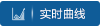
<style>
.page{position:relative;width:100px;height:27px;background:#0f5c98}
.page>*{position:absolute;margin:0}
.t1{font:11.1px "MicrosoftYaHei";letter-spacing:0.04em;color:#ffffff}
</style>
<div class="page">
<p class="t1" style="left:40px;top:8px;width:45px;height:11px">实时曲线</p>
</div>
